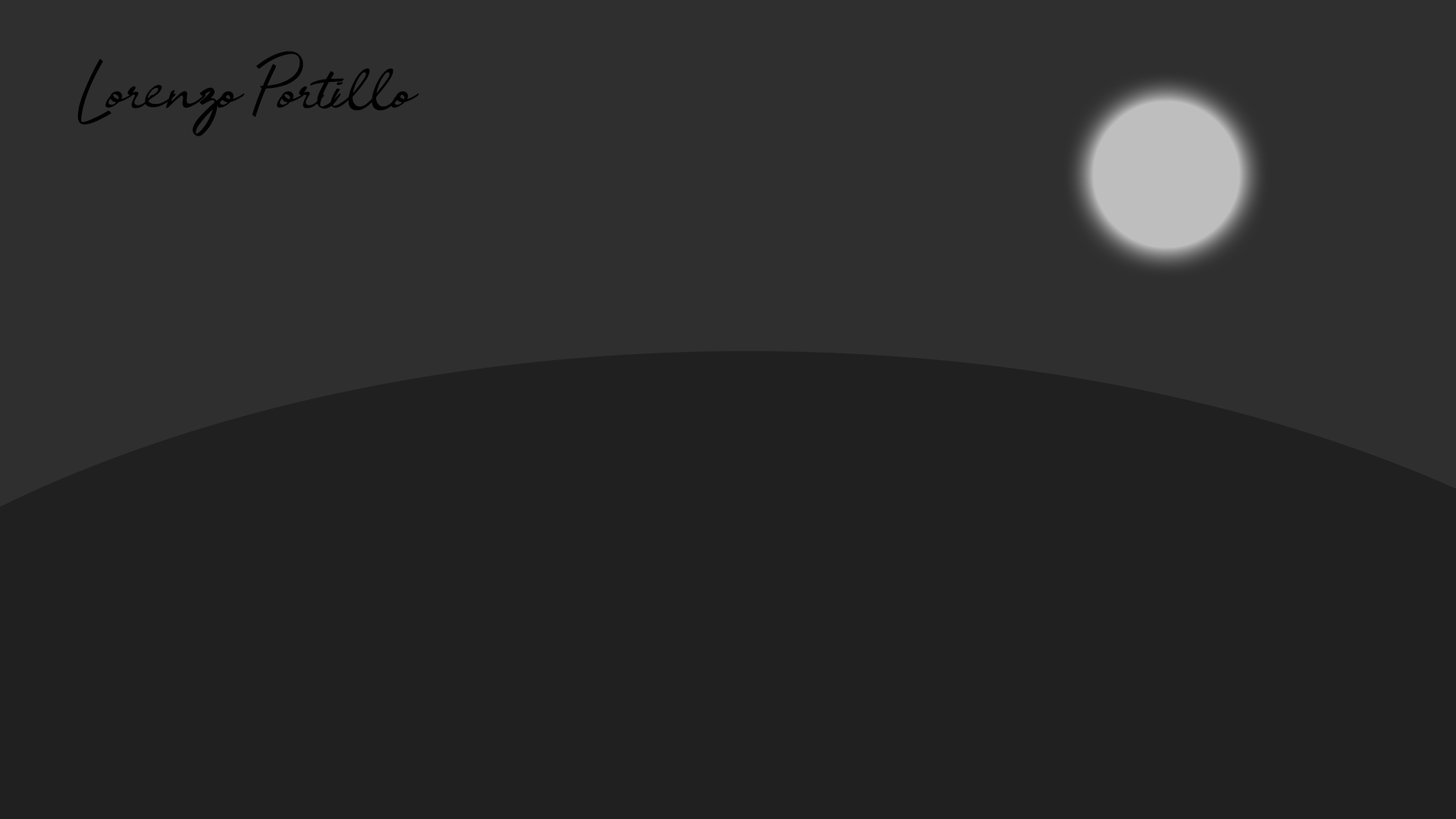
<style>
.page{position:relative;width:1456px;height:819px;background:#202020}
.page>*{position:absolute;margin:0}
.t1{font:56.8px "JelyttaRegular";letter-spacing:-0.06em;color:#000000}
</style>
<div class="page">
<p class="t1" style="left:77px;top:51px;width:342px;height:85px">Lorenzo Portillo</p>
</div>
